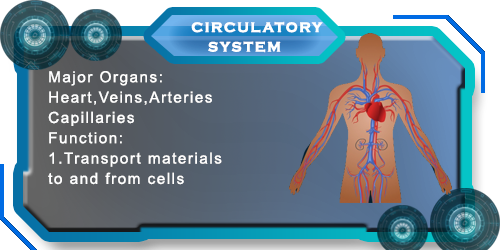
<style>
.page{position:relative;width:500px;height:250px}
.page>*{position:absolute;margin:0}
.t1{font:14px "CopperplateGothic-Bold";letter-spacing:0.1em;color:#ffffff;font-weight:bold}
.t2{font:15.2px/20.3px "ArialMT";letter-spacing:0.1em;color:#ffffff}
</style>
<div class="page">
<p class="t1" style="left:191px;top:21px;width:132px;height:12px">CIRCULATORY</p>
<p class="t1" style="left:208px;top:41px;width:73px;height:12px">SYSTEM</p>
<p class="t2" style="left:48px;top:71px;width:174px;height:114px">Major Organs:<br>Heart,Veins,Arteries<br>Capillaries  <br>Function:<br>1.Transport materials<br>to and from cells</p>
</div>
